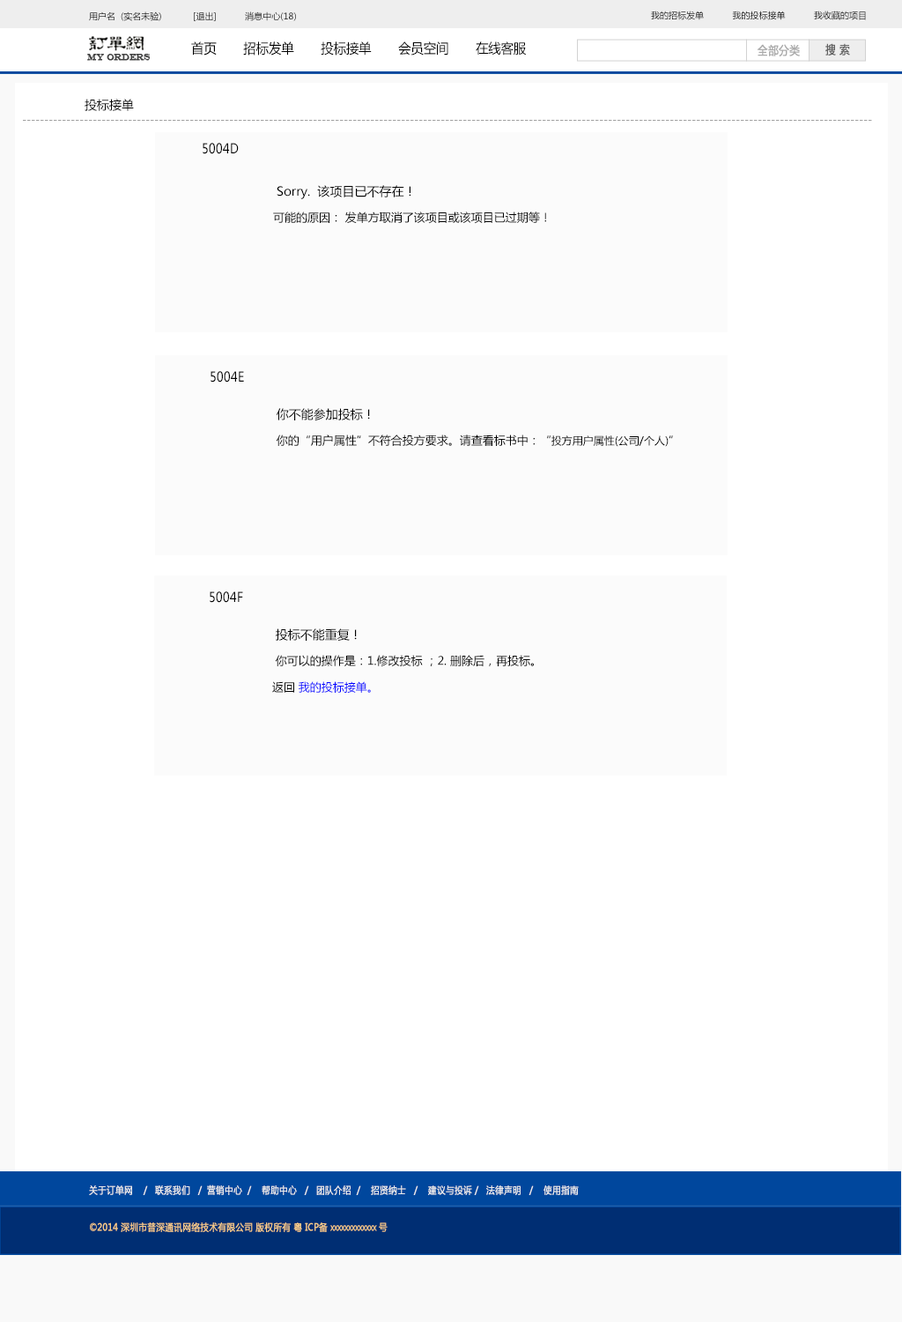
<style>
.page{position:relative;width:902px;height:1322px;background:#ffffff}
.page>*{position:absolute;margin:0}
.t1{font:8.8px "MicrosoftYaHei";color:#000000}
.t2{font:13.6px "MicrosoftYaHei";color:#000000;font-variant:small-caps;scale:0.94 1}
.t3{font:8.7px "EngraversMT";color:#434343;font-variant:small-caps;font-weight:bold;scale:0.86 1}
.t4{font:11.6px "MicrosoftYaHei";color:#aaaaaa;font-variant:small-caps;font-weight:bold;scale:0.86 1}
.t5{font:11.6px "MicrosoftYaHei";color:#626262;font-variant:small-caps;font-weight:bold;scale:0.86 1}
.t6{font:12.3px "MicrosoftYaHei";color:#000000}
.t7{font:10.6px "MicrosoftYaHei";color:#a0a0a0}
.t8{font:13.4px "MicrosoftYaHei";color:#000000;font-variant:small-caps;scale:0.86 1}
.t9{font:11.5px/26.4px "MicrosoftYaHei";color:#000000}
.t10{font:12.3px/26.4px "MicrosoftYaHei";color:#000000}
.t11{font:10.6px/22.9px "MicrosoftYaHei";color:#000000}
.t12{font:11.5px/26.4px "MicrosoftYaHei";color:#0000ff}
.t13{font:9.7px "MicrosoftYaHei";color:#eeeeee;font-variant:small-caps;font-weight:bold;scale:0.86 1}
.t14{font:13.6px "STXihei";color:#eeeeee;font-variant:small-caps;font-weight:bold;scale:0.86 1}
.t15{font:9.7px "MicrosoftYaHei";color:#facd89;font-variant:small-caps;font-weight:bold;scale:0.87 1}
.t16{font:9.7px "MicrosoftYaHei";color:#eeeeee;font-variant:small-caps;font-weight:bold;scale:0.87 1}
</style>
<div class="page">
<p class="t1" style="left:89px;top:11px;width:207px;height:10px">用户名  (实名未验)            [退出]           消息中心(18)</p>
<p class="t1" style="left:651px;top:11px;width:215px;height:9px">我的招标发单           我的投标接单           我收藏的项目</p>
<p class="t2" style="left:191px;top:41px;width:336px;height:15px">首页       招标发单       投标接单       会员空间       在线客服</p>
<p class="t3" style="left:87px;top:54px;width:64px;height:7px">MY ORDERS</p>
<p class="t4" style="left:758px;top:44px;width:42px;height:12px">全部分类</p>
<p class="t5" style="left:826px;top:43px;width:24px;height:13px">搜 索</p>
<p class="t6" style="left:85px;top:99px;width:49px;height:12px">投标接单</p>
<p class="t7" style="left:23px;top:120px;width:849px;height:1px">-------------------------------------------------------------------------------------------------------------------------------------------------------------------------------------------------</p>
<p class="t8" style="left:203px;top:143px;width:36px;height:11px">5004D</p>
<p class="t9" style="left:273px;top:185px;width:273px;height:39px"><span class="t10">Sorry.  该项目已不存在！ <br></span>可能的原因： 发单方取消了该项目或该项目已过期等！</p>
<p class="t8" style="left:211px;top:371px;width:33px;height:11px">5004E</p>
<p class="t9" style="left:276px;top:408px;width:397px;height:39px"><span class="t10">你不能参加投标！ <br></span> 你的“用户属性”不符合投方要求。请查看标书中：“<span class="t11">投方用户属性(公司/个人)</span>”</p>
<p class="t8" style="left:210px;top:591px;width:33px;height:12px">5004F</p>
<p class="t9" style="left:272px;top:628px;width:262px;height:65px"><span class="t10">投标不能重复！ <br></span> 你可以的操作是：1.修改投标 ；2. 删除后，再投标。<br>返回 <span class="t12">我的投标接单。</span></p>
<p class="t13" style="left:89px;top:1184px;width:490px;height:11px"><span class="t14"><br><br></span>关于订单网    /   联系我们   /  营销中心  /    帮助中心   /   团队介绍  /    招贤纳士   /    建议与投诉 /   法律声明   /    使用指南</p>
<p class="t15" style="left:90px;top:1222px;width:298px;height:10px"><span class="t16"> </span>©2014 深圳市普深通讯网络技术有限公司 版权所有 粤 ICP备 xxxxxxxxxxxxx 号</p>
</div>
